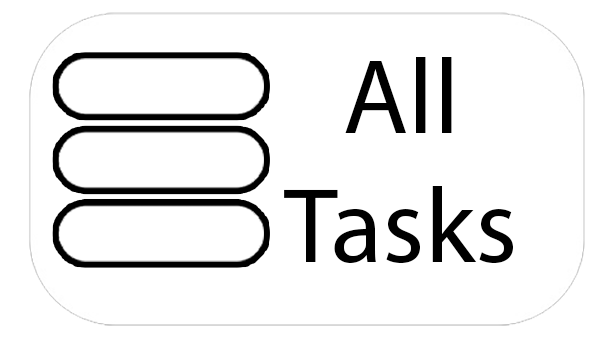
<style>
.page{position:relative;width:614px;height:338px;background:#ffffff}
.page>*{position:absolute;margin:0}
.t1{font:107.1px "MyriadPro-Regular";color:#000000}
</style>
<div class="page">
<p class="t1" style="left:284px;top:57px;width:229px;height:206px;text-align:center">All<br>Tasks</p>
</div>
